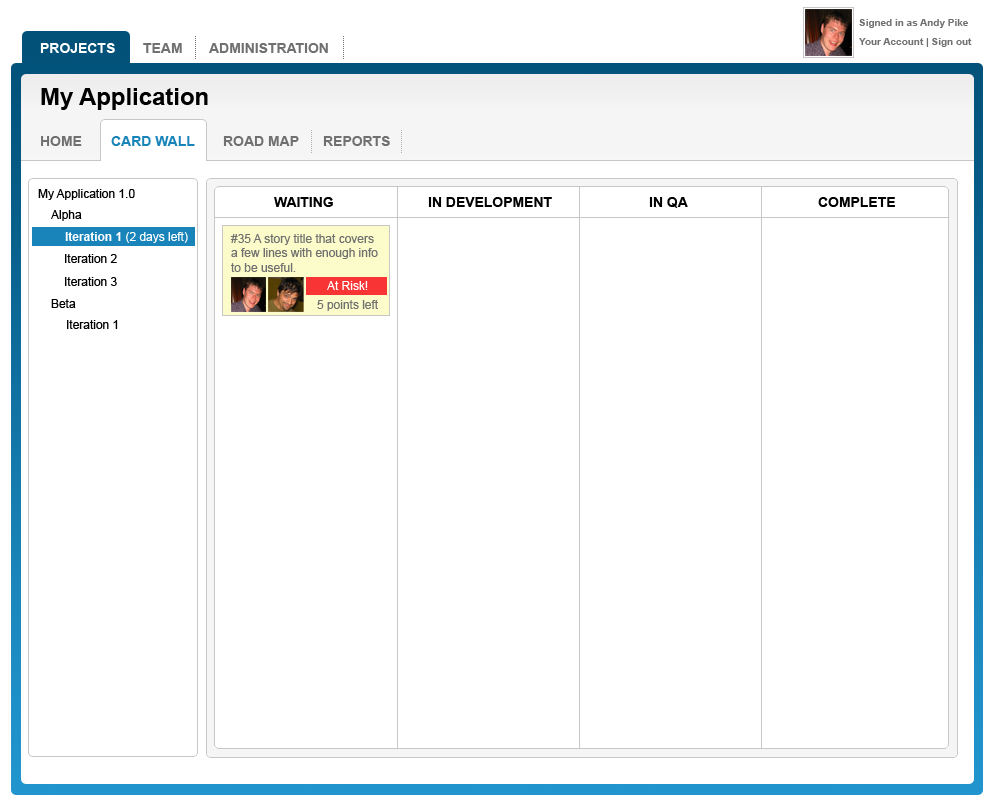
<style>
.page{position:relative;width:1000px;height:810px;background:#ffffff}
.page>*{position:absolute;margin:0}
.t1{font:10px "Arial-BoldMT";color:#707070}
.t2{font:13.9px "Arial-BoldMT";color:#ffffff}
.t3{font:13.9px "Arial-BoldMT";color:#707070}
.t4{font:23.9px "Arial-BoldMT";color:#000000}
.t5{font:13.9px "Arial-BoldMT";color:#1984ba}
.t6{font:12px "ArialMT";color:#000000}
.t7{font:13.9px "Arial-BoldMT";color:#000000}
.t8{font:12px "ArialMT";color:#ffffff}
.t9{font:12px "Arial-BoldMT";color:#ffffff}
.t10{font:12px "ArialMT";color:#707070}
</style>
<div class="page">
<p class="t1" style="left:859px;top:19px;width:109px;height:9px">Signed in as Andy Pike</p>
<p class="t1" style="left:859px;top:38px;width:113px;height:9px">Your Account | Sign out</p>
<p class="t2" style="left:40px;top:43px;width:75px;height:10px">PROJECTS</p>
<p class="t3" style="left:143px;top:43px;width:39px;height:10px">TEAM</p>
<p class="t3" style="left:209px;top:43px;width:119px;height:10px">ADMINISTRATION</p>
<p class="t4" style="left:41px;top:88px;width:167px;height:22px">My Application</p>
<p class="t3" style="left:41px;top:136px;width:41px;height:10px">HOME</p>
<p class="t5" style="left:111px;top:136px;width:84px;height:10px">CARD WALL</p>
<p class="t3" style="left:223px;top:136px;width:76px;height:10px">ROAD MAP</p>
<p class="t3" style="left:323px;top:136px;width:67px;height:10px">REPORTS</p>
<p class="t6" style="left:38px;top:189px;width:97px;height:11px">My Application 1.0</p>
<p class="t7" style="left:274px;top:197px;width:59px;height:10px">WAITING</p>
<p class="t7" style="left:428px;top:197px;width:124px;height:10px">IN DEVELOPMENT</p>
<p class="t7" style="left:649px;top:197px;width:39px;height:11px">IN QA</p>
<p class="t7" style="left:818px;top:197px;width:77px;height:10px">COMPLETE</p>
<p class="t6" style="left:51px;top:210px;width:31px;height:11px">Alpha</p>
<p class="t8" style="left:65px;top:232px;width:123px;height:11px"><span class="t9">Iteration 1</span> (2 days left)</p>
<p class="t10" style="left:230px;top:234px;width:148px;height:38px;text-align:justify">#35 A story title that covers<br>a few lines with enough info<br>to be useful.</p>
<p class="t6" style="left:65px;top:254px;width:52px;height:9px">Iteration 2</p>
<p class="t6" style="left:65px;top:277px;width:52px;height:9px">Iteration 3</p>
<p class="t8" style="left:327px;top:281px;width:41px;height:9px">At Risk!</p>
<p class="t6" style="left:51px;top:299px;width:25px;height:9px">Beta</p>
<p class="t10" style="left:317px;top:300px;width:61px;height:11px">5 points left</p>
<p class="t6" style="left:67px;top:320px;width:51px;height:9px">Iteration 1</p>
</div>
